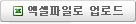
<style>
.page{position:relative;width:136px;height:24px;background:#ffffff}
.page>*{position:absolute;margin:0}
.t1{font:12px "morris9";color:#646464;font-weight:bold}
</style>
<div class="page">
<p class="t1" style="left:28px;top:6px;width:95px;height:10px">엑셀파일로 업로드</p>
</div>
